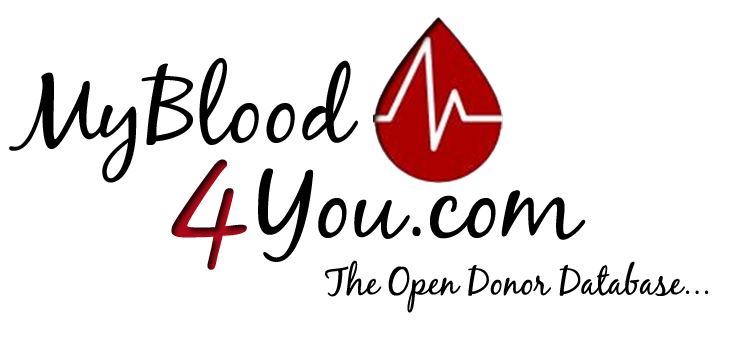
<style>
.page{position:relative;width:750px;height:360px;background:#ffffff}
.page>*{position:absolute;margin:0}
.t1{font:100px "BlackJackRegular";color:#000002}
.t2{font:150px "BlackJackRegular"}
.t3{font:37.5px "BlackJackRegular";color:#000002}
</style>
<div class="page">
<p class="t1" style="left:9px;top:58px;width:349px;height:125px">MyBlood</p>
<p class="t2" style="left:171px;top:159px;width:76px;height:111px">4</p>
<p class="t1" style="left:258px;top:168px;width:328px;height:94px">You.com</p>
<p class="t3" style="left:325px;top:260px;width:384px;height:53px">The Open Donor Database...</p>
</div>
